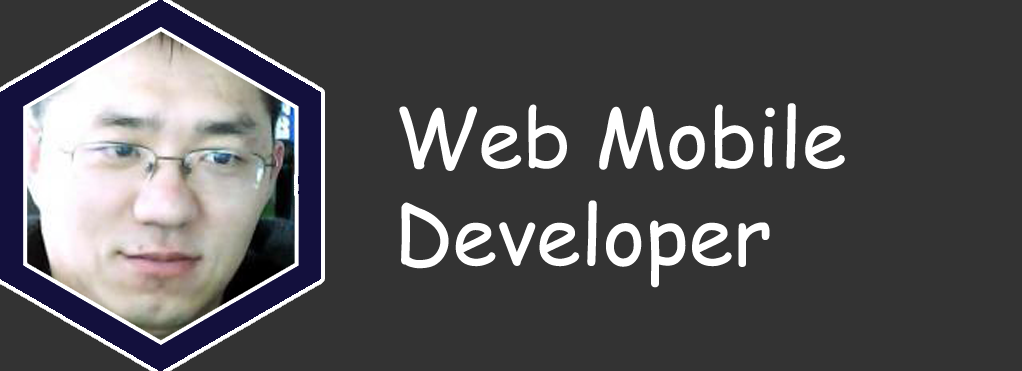
<style>
.page{position:relative;width:1022px;height:371px;background:#333333}
.page>*{position:absolute;margin:0}
.t1{font:81px "ComicSansMS";color:#ffffff}
</style>
<div class="page">
<p class="t1" style="left:399px;top:103px;width:446px;height:185px">Web Mobile <br>Developer</p>
</div>
